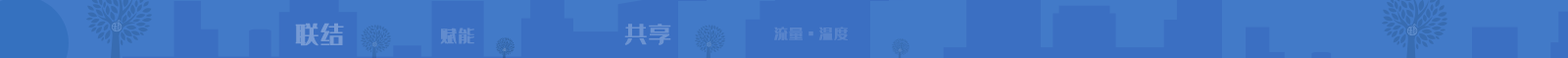
<style>
.page{position:relative;width:1568px;height:58px;background:#427ac8}
.page>*{position:absolute;margin:0}
.t1{font:22.4px "35--Regular";letter-spacing:0.1em;color:#769ad4;font-weight:bold}
.t2{font:15.8px "35--Regular";letter-spacing:0.1em;color:#628cce;font-weight:bold}
.t3{font:21.3px "35--Regular";letter-spacing:0.1em;color:#6c93d1;font-weight:bold}
.t4{font:13.3px "35--Regular";letter-spacing:0.1em;color:#5884cb;font-weight:bold}
</style>
<div class="page">
<p class="t1" style="left:295px;top:23px;width:49px;height:23px">联结</p>
<p class="t2" style="left:440px;top:27px;width:34px;height:17px">赋能</p>
<p class="t3" style="left:624px;top:24px;width:47px;height:21px">共享</p>
<p class="t4" style="left:774px;top:26px;width:74px;height:14px">流量·温度</p>
</div>
